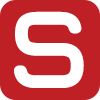
<style>
.page{position:relative;width:100px;height:100px;background:#be2026}
.page>*{position:absolute;margin:0}
.t1{font:149.9px "Jura-Bold";color:#ffffff}
</style>
<div class="page">
<p class="t1" style="left:14px;top:11px;width:70px;height:77px">s</p>
</div>
